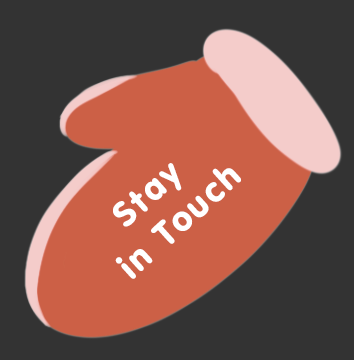
<style>
.page{position:relative;width:354px;height:360px;background:#333333}
.page>*{position:absolute;margin:0}
.t1{font:35px "NokiaSansS60-Bold";letter-spacing:0.08em;color:#ffffff}
</style>
<div class="page">
<p class="t1" style="left:113px;top:163px;width:128px;height:116px;text-align:center;rotate:-42deg">Stay <br>in Touch</p>
</div>
